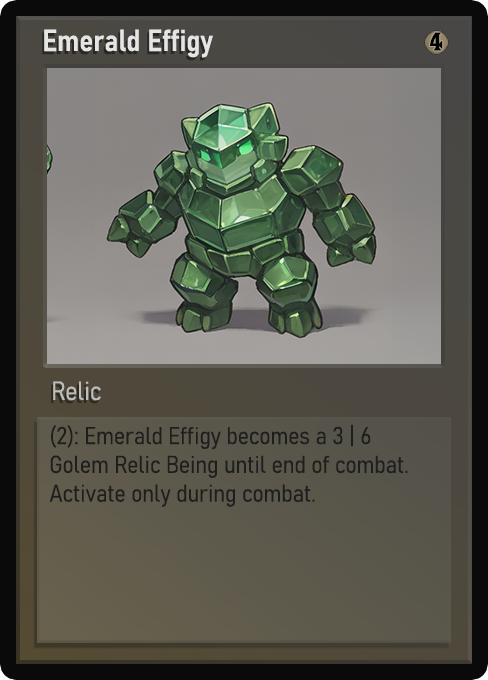
<style>
.page{position:relative;width:488px;height:680px}
.page>*{position:absolute;margin:0}
.t1{font:30px "Bahnschrift-SemiBoldSemiCondensed";color:#f2f2f2;font-weight:bold}
.t2{font:25px "WTRRoycroft";color:#000000;font-weight:bold;scale:1.09 1}
.t3{font:26px "Bahnschrift-LightSemiCondensed";color:#c8c8c8;font-weight:bold}
.t4{font:24px "Bahnschrift-LightSemiCondensed";color:#1e1e1e;font-weight:bold}
</style>
<div class="page">
<p class="t1" style="left:44px;top:29px;width:169px;height:29px;opacity:0.9">Emerald Effigy</p>
<p class="t2" style="left:430px;top:32px;width:13px;height:19px">4</p>
<p class="t3" style="left:53px;top:381px;width:48px;height:20px;opacity:0.9">Relic</p>
<p class="t4" style="left:49px;top:424px;width:359px;height:83px">(2): Emerald Effigy becomes a 3 | 6 Golem Relic Being until end of combat. Activate only during combat.</p>
</div>
